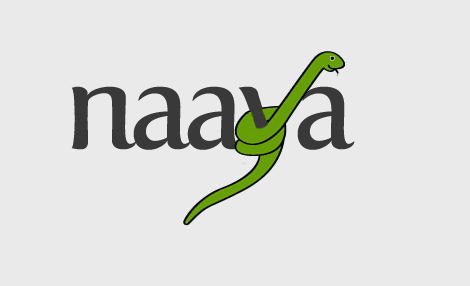
<style>
.page{position:relative;width:470px;height:286px;background:#eaeaea}
.page>*{position:absolute;margin:0}
.t1{font:120px "Fertigo-Regular";letter-spacing:-0.06em;color:#393939}
.t2{font:120px "Fertigo-Regular";letter-spacing:-0.1em}
.t3{font:120px "Fertigo-Regular";letter-spacing:-0.1em;color:#393939}
</style>
<div class="page">
<p class="t1" style="left:71px;top:86px;width:174px;height:64px">naa</p>
<p class="t2" style="left:238px;top:86px;width:63px;height:89px">y</p>
<p class="t3" style="left:297px;top:86px;width:58px;height:64px">a</p>
</div>
